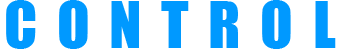
<style>
.page{position:relative;width:340px;height:52px;background:#ffffff}
.page>*{position:absolute;margin:0}
.t1{font:60px "Impact";letter-spacing:0.075em;color:#0099ff}
</style>
<div class="page">
<p class="t1" style="left:6px;top:0px;width:330px;height:49px">C O N T R O L</p>
</div>
